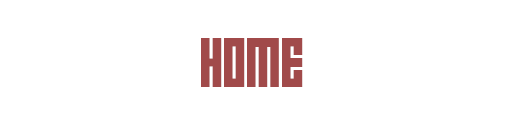
<style>
.page{position:relative;width:512px;height:128px;background:#ffffff}
.page>*{position:absolute;margin:0}
.t1{font:57.8px "AngiesNewHouse";color:#a14a4a}
</style>
<div class="page">
<p class="t1" style="left:201px;top:38px;width:102px;height:49px">HOME</p>
</div>
